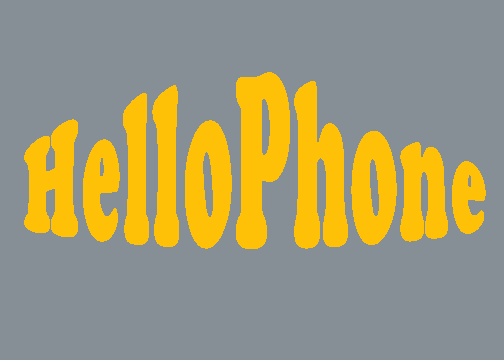
<style>
.page{position:relative;width:504px;height:360px;background:#868e96}
.page>*{position:absolute;margin:0}
.t1{font:88.7px "CooperBlack";color:#ffc107;scale:0.89 1}
</style>
<div class="page">
<p class="t1" style="left:24px;top:72px;width:462px;height:177px;text-align:center">HelloPhone</p>
</div>
